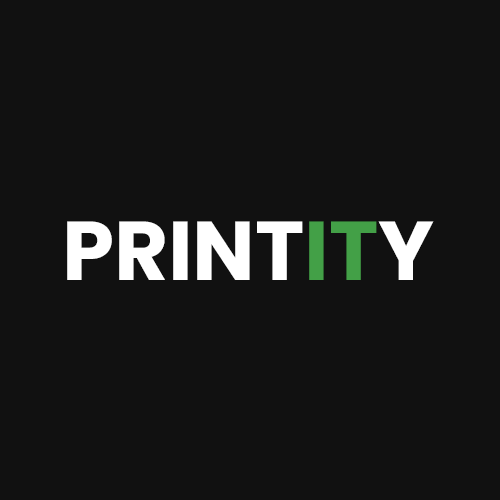
<style>
.page{position:relative;width:500px;height:500px;background:#111111}
.page>*{position:absolute;margin:0}
.t1{font:83.3px "Poppins-Bold";color:#ffffff;text-transform:uppercase}
.t2{font:83.3px "Poppins-Bold";color:#43a047;text-transform:uppercase}
</style>
<div class="page">
<p class="t1" style="left:67px;top:221px;width:367px;height:59px">print<span class="t2">it</span>y</p>
</div>
